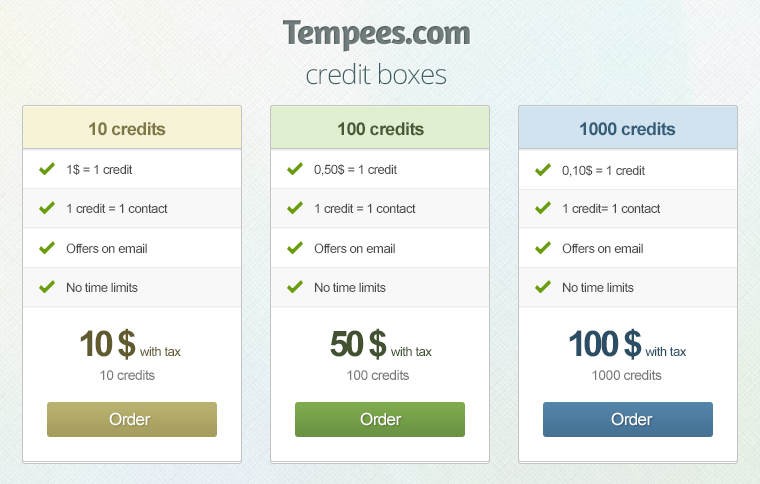
<style>
.page{position:relative;width:760px;height:484px;background:#ffffff}
.page>*{position:absolute;margin:0}
.t1{font:35.3px "Amaranth-Bold";letter-spacing:-0.035em;color:#717d7d}
.t2{font:27.4px "OpenSans-Light";letter-spacing:-0.04em;color:#4b787c}
.t3{font:17.6px "Arial-BoldMT";letter-spacing:-0.035em;color:#7d7846}
.t4{font:17.6px "Arial-BoldMT";letter-spacing:-0.035em;color:#495938}
.t5{font:17.6px "Arial-BoldMT";letter-spacing:-0.035em;color:#365d78}
.t6{font:12.7px "ArialMT";letter-spacing:-0.035em;color:#484848}
.t7{font:12.7px "ArialMT";letter-spacing:-0.035em;color:#5f5b2e}
.t8{font:35.3px "Arial-BoldMT";letter-spacing:-0.1em;color:#5f5b2e}
.t9{font:12.7px "ArialMT";letter-spacing:-0.035em;color:#435332}
.t10{font:35.3px "Arial-BoldMT";letter-spacing:-0.1em;color:#435332}
.t11{font:12.7px "ArialMT";letter-spacing:-0.035em;color:#2c4e65}
.t12{font:35.3px "Arial-BoldMT";letter-spacing:-0.1em;color:#2c4e65}
.t13{font:13.7px "ArialMT";letter-spacing:-0.035em;color:#787878}
.t14{font:16.7px "ArialMT";letter-spacing:-0.035em;color:#ffffff}
</style>
<div class="page">
<p class="t1" style="left:283px;top:20px;width:187px;height:32px">Tempees.com</p>
<p class="t2" style="left:306px;top:63px;width:141px;height:22px">credit boxes</p>
<p class="t3" style="left:89px;top:122px;width:77px;height:14px">10 credits</p>
<p class="t4" style="left:338px;top:122px;width:86px;height:14px">100 credits</p>
<p class="t5" style="left:580px;top:122px;width:96px;height:14px">1000 credits</p>
<p class="t6" style="left:67px;top:164px;width:66px;height:11px">1$ = 1 credit</p>
<p class="t6" style="left:314px;top:164px;width:83px;height:12px">0,50$ = 1 credit</p>
<p class="t6" style="left:562px;top:165px;width:83px;height:12px">0,10$ = 1 credit</p>
<p class="t6" style="left:67px;top:203px;width:101px;height:10px">1 credit = 1 contact</p>
<p class="t6" style="left:315px;top:203px;width:101px;height:10px">1 credit = 1 contact</p>
<p class="t6" style="left:563px;top:203px;width:98px;height:10px">1 credit= 1 contact</p>
<p class="t6" style="left:66px;top:243px;width:81px;height:11px">Offers on email</p>
<p class="t6" style="left:314px;top:243px;width:81px;height:11px">Offers on email</p>
<p class="t6" style="left:562px;top:243px;width:81px;height:11px">Offers on email</p>
<p class="t6" style="left:67px;top:282px;width:71px;height:10px">No time limits</p>
<p class="t6" style="left:315px;top:282px;width:71px;height:10px">No time limits</p>
<p class="t6" style="left:563px;top:282px;width:71px;height:10px">No time limits</p>
<p class="t7" style="left:80px;top:328px;width:101px;height:32px"><span class="t8">10 $</span>  with tax</p>
<p class="t9" style="left:330px;top:328px;width:102px;height:32px"><span class="t10">50 $</span>  with tax</p>
<p class="t11" style="left:569px;top:328px;width:118px;height:32px"><span class="t12">100 $</span>  with tax</p>
<p class="t13" style="left:100px;top:370px;width:55px;height:10px">10 credits</p>
<p class="t13" style="left:347px;top:370px;width:62px;height:10px">100 credits</p>
<p class="t13" style="left:592px;top:370px;width:70px;height:10px">1000 credits</p>
<p class="t14" style="left:109px;top:412px;width:42px;height:14px">Order</p>
<p class="t14" style="left:360px;top:412px;width:42px;height:14px">Order</p>
<p class="t14" style="left:611px;top:412px;width:42px;height:14px">Order</p>
</div>
